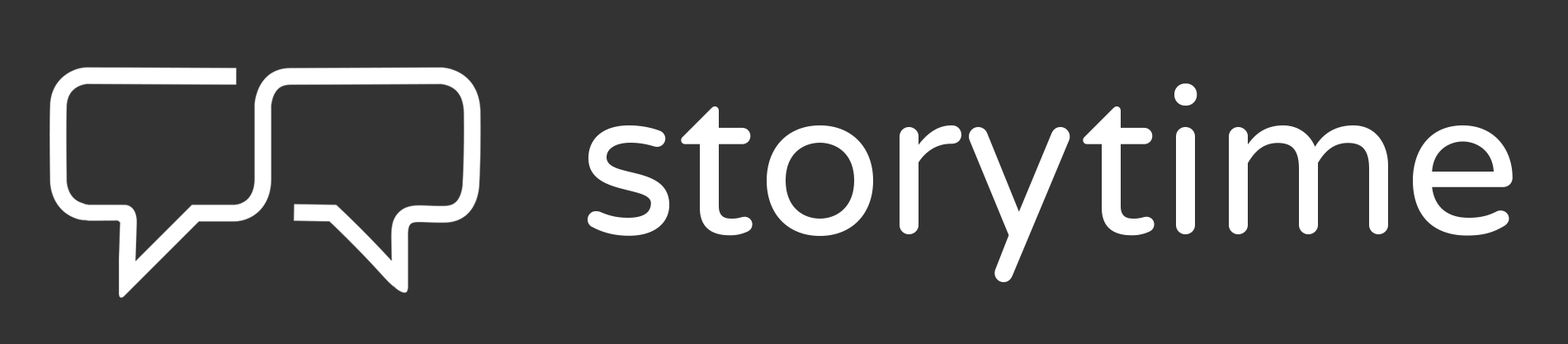
<style>
.page{position:relative;width:1568px;height:344px;background:#333333}
.page>*{position:absolute;margin:0}
.t1{font:207.9px "VarelaRound";color:#ffffff}
</style>
<div class="page">
<p class="t1" style="left:588px;top:83px;width:925px;height:199px">storytime</p>
</div>
